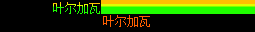
<style>
.page{position:relative;width:255px;height:32px;background:#000000}
.page>*{position:absolute;margin:0}
.t1{font:12px "SimSun";color:#ff5f00}
</style>
<div class="page">
<p class="t1" style="left:103px;top:15px;width:47px;height:12px">叶尔加瓦</p>
</div>
